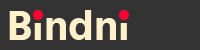
<style>
.page{position:relative;width:200px;height:50px;background:#333333}
.page>*{position:absolute;margin:0}
.t1{font:42px "Hind-Bold";color:#fff1cc}
</style>
<div class="page">
<p class="t1" style="left:9px;top:8px;width:119px;height:32px">Bindni</p>
</div>
